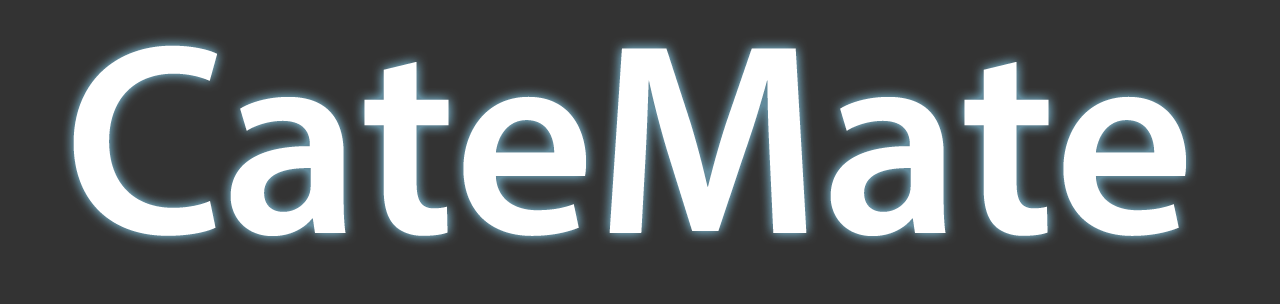
<style>
.page{position:relative;width:1280px;height:304px;background:#333333}
.page>*{position:absolute;margin:0}
.t1{font:273.2px "MyriadPro-Semibold";color:#ffffff}
</style>
<div class="page">
<p class="t1" style="left:73px;top:45px;width:1113px;height:191px">CateMate</p>
</div>
